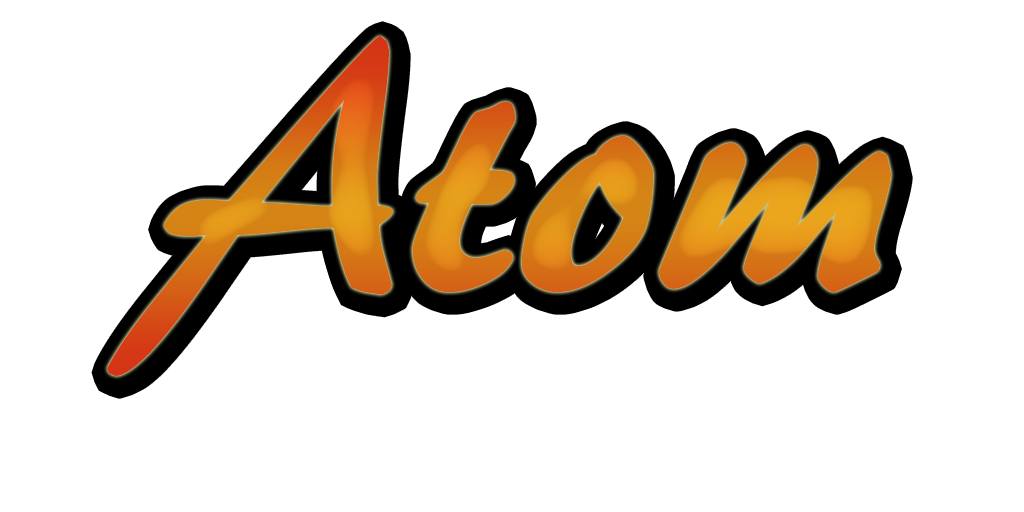
<style>
.page{position:relative;width:1024px;height:512px;background:#ffffff}
.page>*{position:absolute;margin:0}
.t1{font:372px "ARBERKLEY"}
</style>
<div class="page">
<p class="t1" style="left:107px;top:35px;width:784px;height:341px">Atom</p>
</div>
